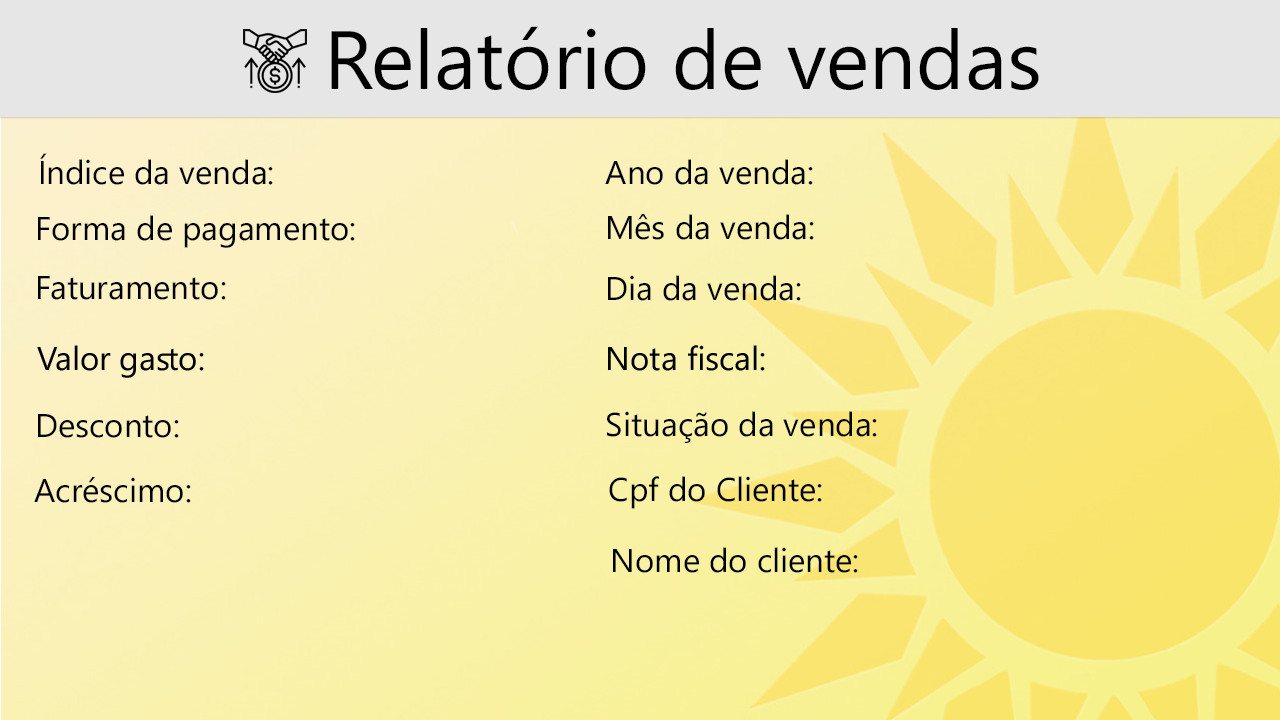
<style>
.page{position:relative;width:1280px;height:720px}
.page>*{position:absolute;margin:0}
.t1{font:82.5px "SegoeUI";color:#000000}
.t2{font:33px "SegoeUI";color:#000000}
</style>
<div class="page">
<p class="t1" style="left:331px;top:26px;width:708px;height:64px">Relatório de vendas</p>
<p class="t2" style="left:40px;top:153px;width:233px;height:32px">Índice da venda:</p>
<p class="t2" style="left:605px;top:159px;width:208px;height:26px">Ano da venda:</p>
<p class="t2" style="left:38px;top:215px;width:317px;height:33px">Forma de pagamento:</p>
<p class="t2" style="left:608px;top:214px;width:206px;height:26px">Mês da venda:</p>
<p class="t2" style="left:38px;top:276px;width:188px;height:24px">Faturamento:</p>
<p class="t2" style="left:608px;top:275px;width:193px;height:26px">Dia da venda:</p>
<p class="t2" style="left:37px;top:345px;width:167px;height:33px">Valor gasto:</p>
<p class="t2" style="left:608px;top:345px;width:157px;height:26px">Nota fiscal:</p>
<p class="t2" style="left:38px;top:414px;width:141px;height:24px">Desconto:</p>
<p class="t2" style="left:607px;top:411px;width:270px;height:32px">Situação da venda:</p>
<p class="t2" style="left:34px;top:477px;width:157px;height:26px">Acréscimo:</p>
<p class="t2" style="left:609px;top:476px;width:213px;height:33px">Cpf do Cliente:</p>
<p class="t2" style="left:613px;top:547px;width:245px;height:26px">Nome do cliente:</p>
</div>
